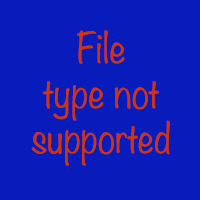
<style>
.page{position:relative;width:200px;height:200px;background:#071cba}
.page>*{position:absolute;margin:0}
.t1{font:37.5px "Noteworthy-Light";color:#d03504}
</style>
<div class="page">
<p class="t1" style="left:31px;top:30px;width:139px;height:136px;text-align:center">File type not supported</p>
</div>
